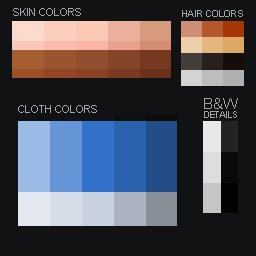
<style>
.page{position:relative;width:256px;height:256px;background:#111213}
.page>*{position:absolute;margin:0}
.t1{font:11px "ArialMT";color:#a3a3a3}
.t2{font:9.8px "ArialMT";color:#a3a3a3}
.t3{font:15.5px "ArialMT";color:#a3a3a3}
.t4{font:9.4px "ArialMT";color:#a3a3a3}
</style>
<div class="page">
<p class="t1" style="left:13px;top:8px;width:68px;height:8px">SKIN COLORS</p>
<p class="t2" style="left:182px;top:10px;width:61px;height:7px">HAIR COLORS</p>
<p class="t3" style="left:204px;top:98px;width:34px;height:11px">B&amp;W</p>
<p class="t1" style="left:18px;top:105px;width:79px;height:8px">CLOTH COLORS</p>
<p class="t4" style="left:204px;top:111px;width:33px;height:7px">DETAILS</p>
</div>
